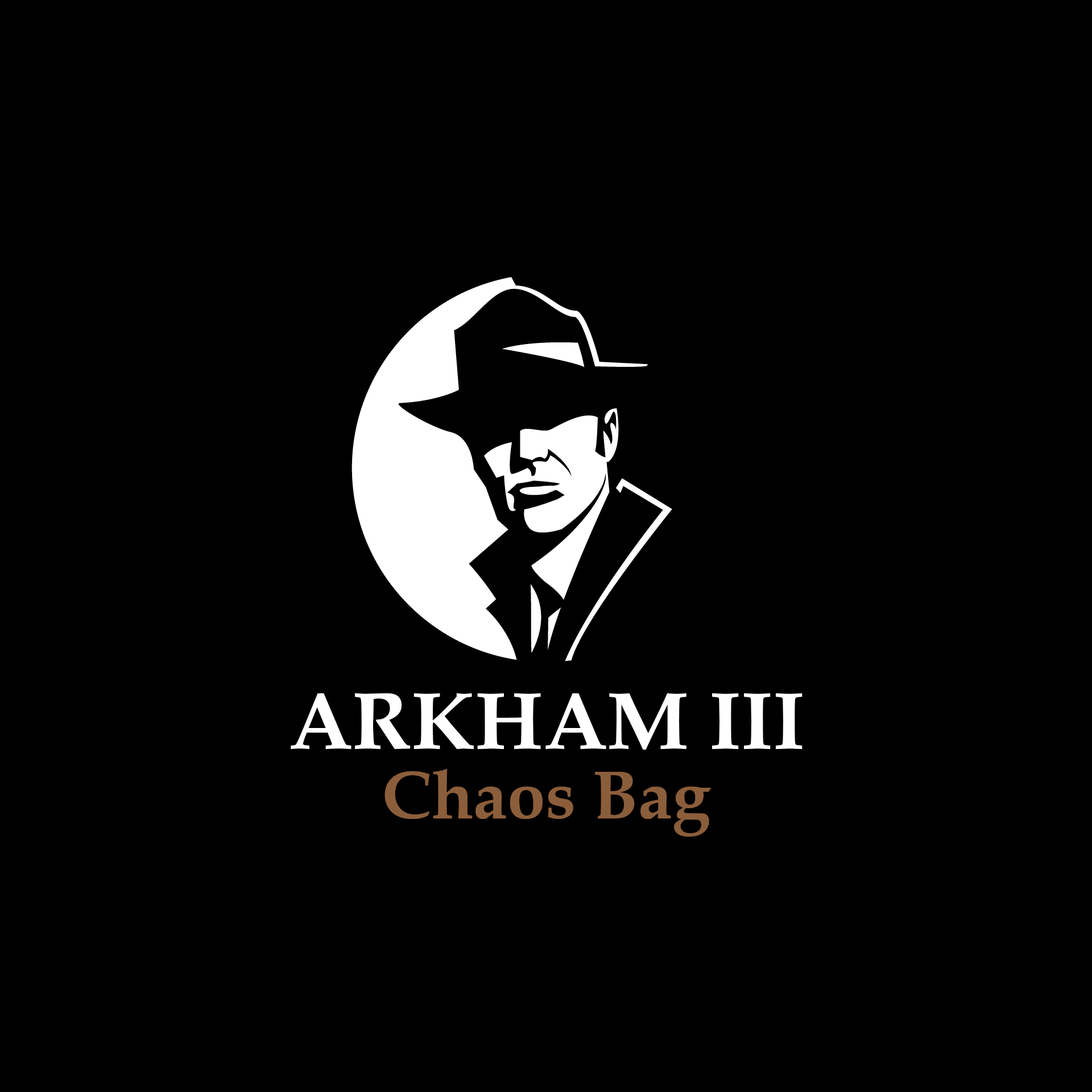
<style>
.page{position:relative;width:1092px;height:1092px;background:#000000}
.page>*{position:absolute;margin:0}
.t1{font:81.9px "BookAntiqua-Bold";color:#ffffff}
.t2{font:68.2px "BookAntiqua-Bold";color:#8b5e3b}
</style>
<div class="page">
<p class="t1" style="left:291px;top:693px;width:511px;height:57px">ARKHAM III</p>
<p class="t2" style="left:384px;top:769px;width:327px;height:68px">Chaos Bag</p>
</div>
